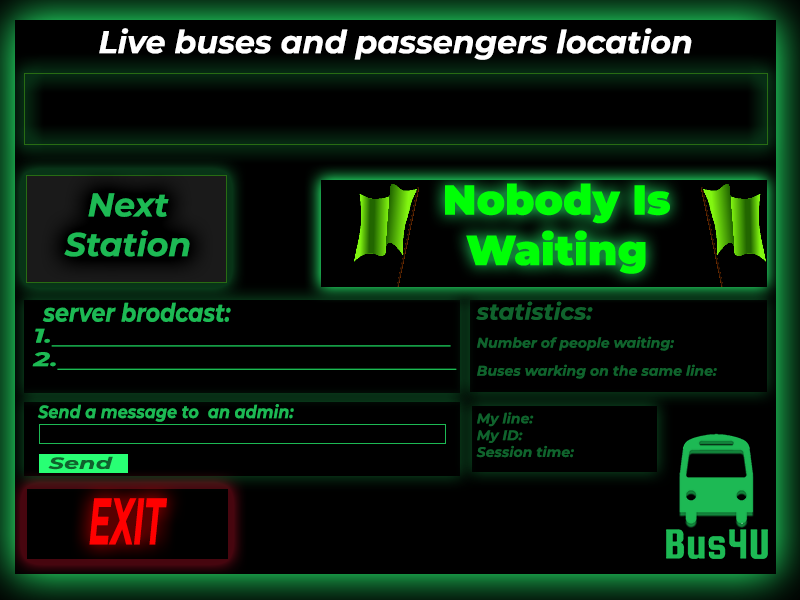
<style>
.page{position:relative;width:800px;height:600px;background:#000000}
.page>*{position:absolute;margin:0}
.t1{font:31.7px "Montserrat-BoldItalic";color:#ffffff}
.t2{font:33px "Montserrat-BoldItalic";color:#1db954}
.t3{font:25.5px "Montserrat-BoldItalic";color:#1db954;scale:0.86 1}
.t4{font:14px/28px "Montserrat-BoldItalic";color:#10632d}
.t5{font:23px/28px "Montserrat-BoldItalic";color:#10632d}
.t6{font:19.6px "Montserrat-BoldItalic";color:#1db954;scale:1.44 1}
.t7{font:17.8px "Montserrat-BoldItalic";color:#1db954;scale:0.9 1}
.t8{font:14px "Montserrat-BoldItalic";color:#10632d}
.t9{font:16.2px "Montserrat-BoldItalic";color:#10632d;scale:1.47 1}
.t10{font:65.5px "Montserrat-BoldItalic";color:#ff0000;scale:0.5 1}
</style>
<div class="page">
<p class="t1" style="left:99px;top:28px;width:593px;height:32px">Live buses and passengers location</p>
<p class="t2" style="left:64px;top:193px;width:126px;height:64px;text-align:center">Next<br>Station</p>
<p class="t3" style="left:42px;top:302px;width:189px;height:20px">server brodcast:</p>
<p class="t4" style="left:476px;top:301px;width:241px;height:78px"><span class="t5">statistics:<br></span>Number of people waiting:<br>Buses warking on the same line:</p>
<p class="t6" style="left:32px;top:328px;width:425px;height:42px">1.                                                  <br>2.                                                  <br>1.</p>
<p class="t7" style="left:37px;top:404px;width:257px;height:18px">Send a message to  an admin:</p>
<p class="t8" style="left:476px;top:412px;width:98px;height:46px">My line:<br>My ID:<br>Session time:</p>
<p class="t9" style="left:48px;top:456px;width:65px;height:14px">Send</p>
<p class="t10" style="left:89px;top:498px;width:78px;height:47px">EXIT</p>
</div>
